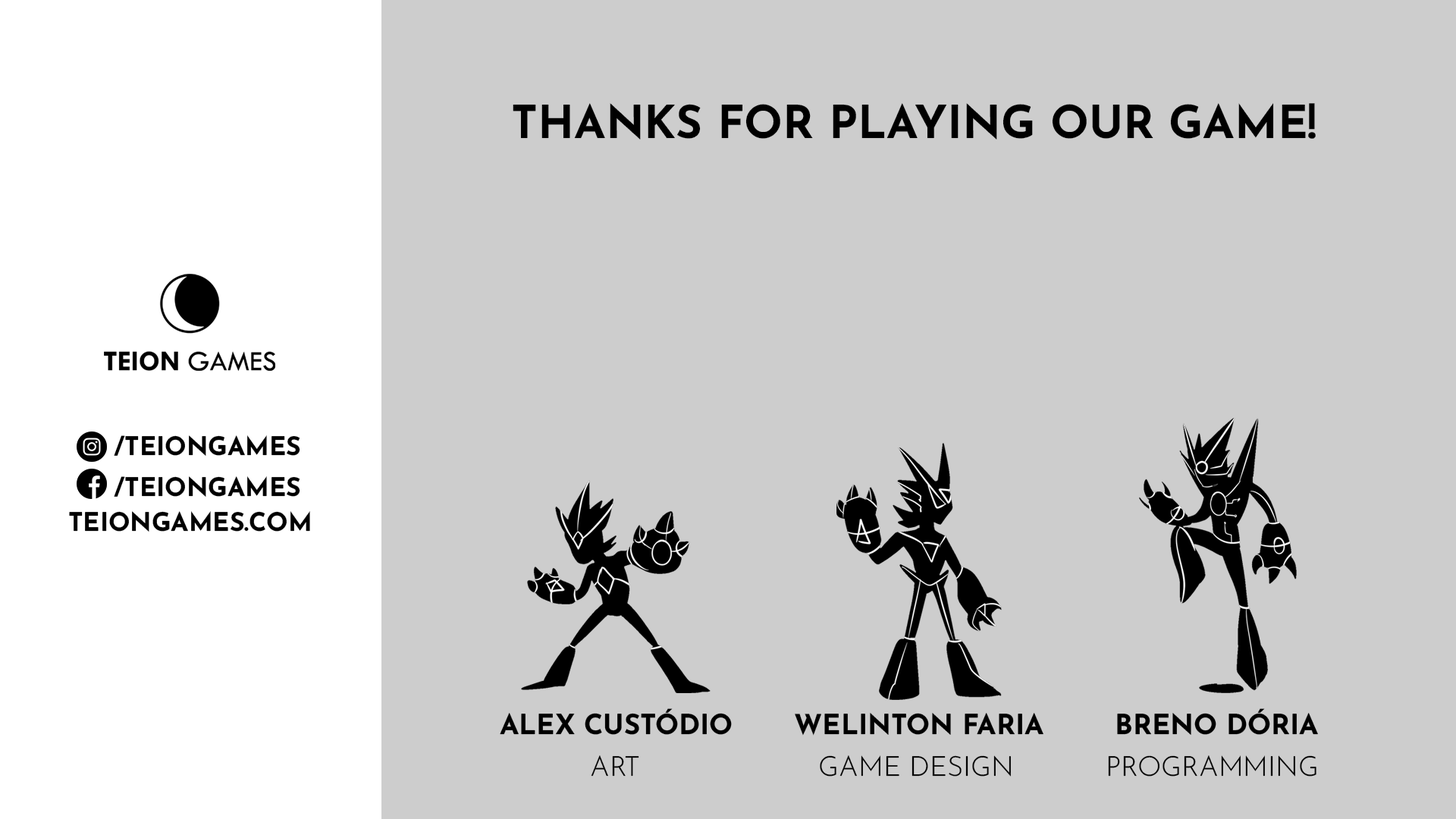
<style>
.page{position:relative;width:1456px;height:819px;background:#cdcdcd}
.page>*{position:absolute;margin:0}
.t1{font:45.3px "JosefinSans-Bold";color:#000000}
.t2{font:25.4px "JosefinSans-Bold";color:#000000}
.t3{font:27.6px "JosefinSans-Bold";color:#000000}
.t4{font:27.6px "JosefinSans-Light";color:#000000}
</style>
<div class="page">
<p class="t1" style="left:513px;top:103px;width:803px;height:37px">THANKS FOR PLAYING OUR GAME!</p>
<p class="t2" style="left:114px;top:435px;width:186px;height:21px">/TEIONGAMES</p>
<p class="t2" style="left:114px;top:476px;width:186px;height:21px">/TEIONGAMES</p>
<p class="t2" style="left:69px;top:511px;width:241px;height:21px">TEIONGAMES.COM</p>
<p class="t3" style="left:500px;top:708px;width:232px;height:27px">ALEX CUSTÓDIO</p>
<p class="t3" style="left:795px;top:713px;width:248px;height:23px">WELINTON FARIA</p>
<p class="t3" style="left:1117px;top:708px;width:201px;height:27px">BRENO DÓRIA</p>
<p class="t4" style="left:591px;top:755px;width:48px;height:22px">ART</p>
<p class="t4" style="left:820px;top:755px;width:191px;height:22px">GAME DESIGN</p>
<p class="t4" style="left:1108px;top:755px;width:208px;height:22px">PROGRAMMING</p>
</div>
